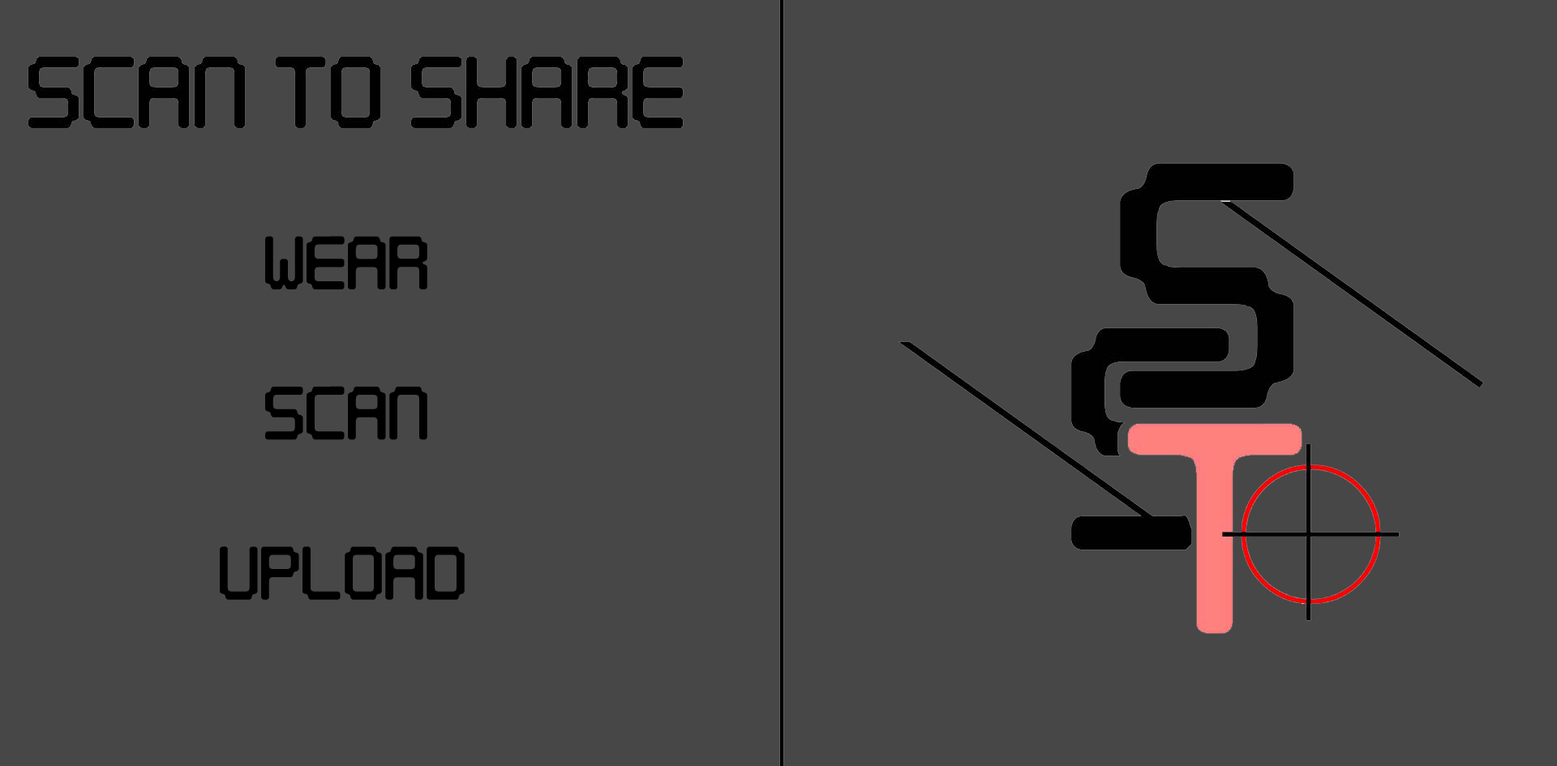
<style>
.page{position:relative;width:1557px;height:766px;background:#474747}
.page>*{position:absolute;margin:0}
.t1{font:75.7px "Digitaltech";color:#000000}
</style>
<div class="page">
<p class="t1" style="left:265px;top:236px;width:162px;height:53px">Wear</p>
<p class="t1" style="left:265px;top:386px;width:162px;height:54px">Scan</p>
<p class="t1" style="left:220px;top:546px;width:245px;height:54px">UPload</p>
</div>
